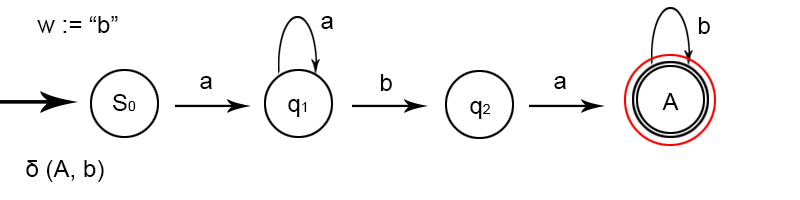
<style>
.page{position:relative;width:800px;height:200px;background:#ffffff}
.page>*{position:absolute;margin:0}
.t1{font:24px "ArialMT";color:#000000}
.t2{font:14px "ArialMT";color:#000000}
</style>
<div class="page">
<p class="t1" style="left:37px;top:16px;width:81px;height:17px">w := “b”</p>
<p class="t1" style="left:321px;top:16px;width:12px;height:13px">a</p>
<p class="t1" style="left:698px;top:17px;width:12px;height:17px">b</p>
<p class="t1" style="left:200px;top:76px;width:12px;height:13px">a</p>
<p class="t1" style="left:380px;top:74px;width:12px;height:17px">b</p>
<p class="t1" style="left:554px;top:76px;width:12px;height:13px">a</p>
<p class="t1" style="left:113px;top:94px;width:23px;height:17px">S<span class="t2">0</span></p>
<p class="t1" style="left:288px;top:99px;width:19px;height:18px">q<span class="t2">1</span></p>
<p class="t1" style="left:470px;top:101px;width:20px;height:18px">q<span class="t2">2</span></p>
<p class="t1" style="left:662px;top:93px;width:17px;height:17px">A</p>
<p class="t1" style="left:26px;top:160px;width:78px;height:22px">δ (A, b)</p>
</div>
